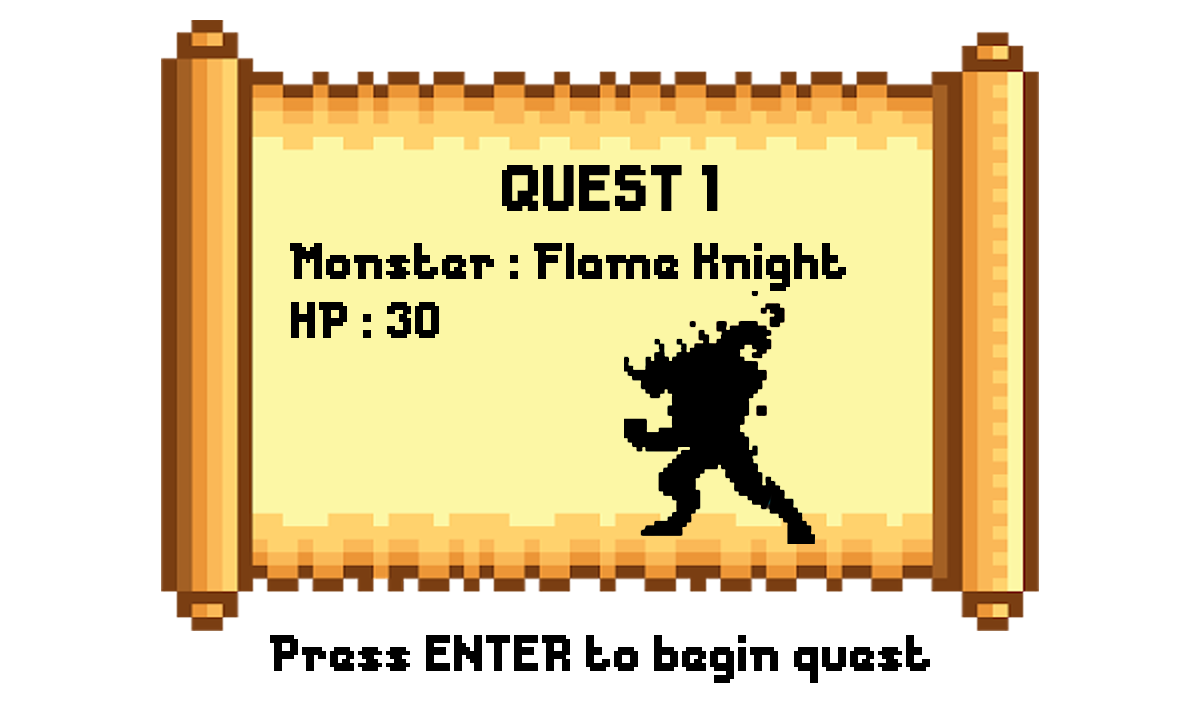
<style>
.page{position:relative;width:1200px;height:720px;background:#ffffff}
.page>*{position:absolute;margin:0}
.t1{font:61.3px "Messe-Duesseldorf";color:#000000}
.t2{font:48px "Messe-Duesseldorf";color:#000000}
</style>
<div class="page">
<p class="t1" style="left:502px;top:165px;width:216px;height:46px">QUEST 1</p>
<p class="t2" style="left:290px;top:243px;width:556px;height:48px">Monster : Flame Knight</p>
<p class="t2" style="left:291px;top:302px;width:148px;height:36px">HP : 30</p>
<p class="t2" style="left:270px;top:635px;width:660px;height:48px">Press ENTER to begin quest</p>
</div>
